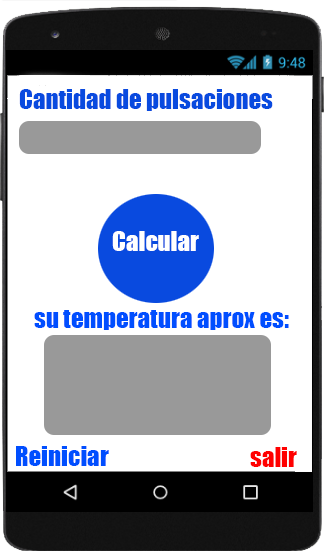
<style>
.page{position:relative;width:324px;height:551px;background:#ffffff}
.page>*{position:absolute;margin:0}
.t1{font:25px "Impact";color:#094adf}
.t2{font:25px "Impact";color:#ffffff}
.t3{font:25px "Impact";color:#004eff}
.t4{font:25px "Impact";color:#ff0000}
</style>
<div class="page">
<p class="t1" style="left:19px;top:89px;width:254px;height:22px">Cantidad de pulsaciones</p>
<p class="t2" style="left:112px;top:231px;width:87px;height:20px">Calcular</p>
<p class="t3" style="left:34px;top:310px;width:255px;height:20px">su temperatura aprox es:</p>
<p class="t3" style="left:16px;top:446px;width:93px;height:20px">Reiniciar</p>
<p class="t4" style="left:250px;top:447px;width:47px;height:20px">salir</p>
</div>
